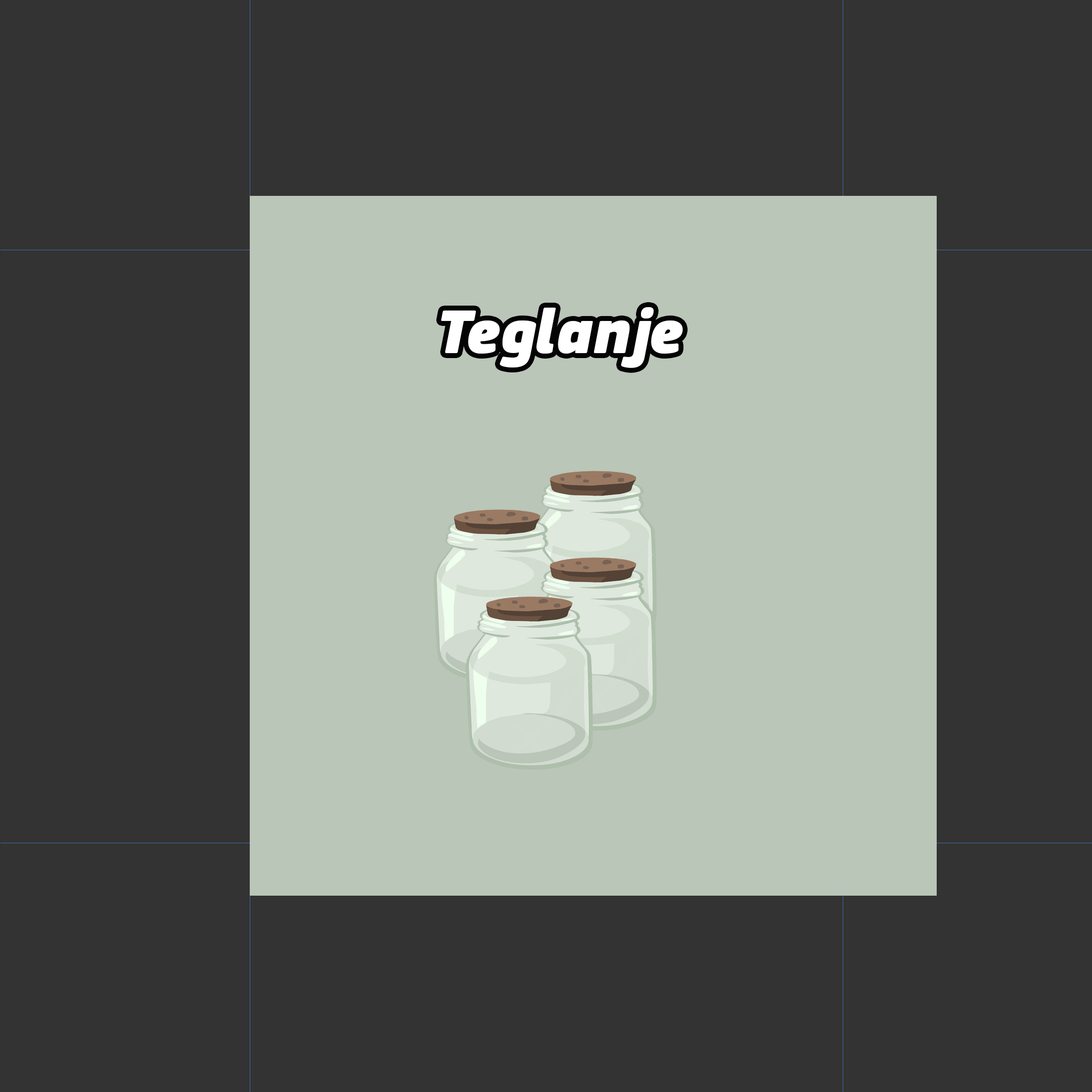
<style>
.page{position:relative;width:1092px;height:1092px;background:#333333}
.page>*{position:absolute;margin:0}
.t1{font:64.3px "PFSquareSansExtraBlackItalic";letter-spacing:0.01em;color:#ffffff}
</style>
<div class="page">
<p class="t1" style="left:441px;top:307px;width:242px;height:61px">Teglanje</p>
</div>
